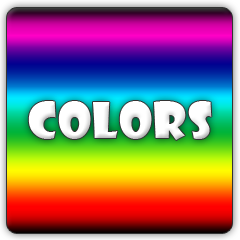
<style>
.page{position:relative;width:240px;height:240px}
.page>*{position:absolute;margin:0}
.t1{font:48px "ShowcardGothic-Reg";letter-spacing:0.025em;color:#ffffff}
</style>
<div class="page">
<p class="t1" style="left:28px;top:101px;width:184px;height:39px">COLORS</p>
</div>
